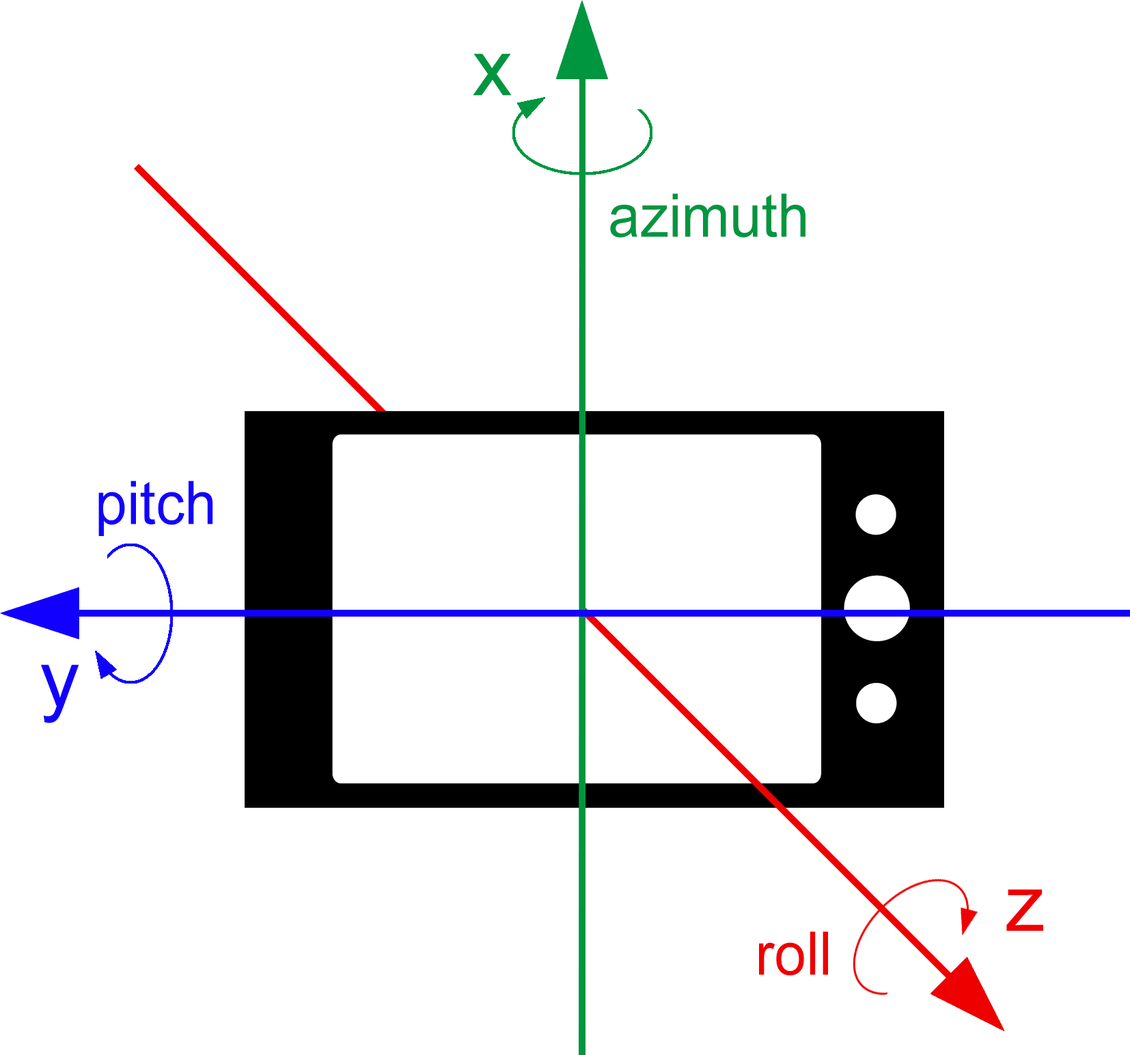
<style>
.page{position:relative;width:1130px;height:1055px;background:#ffffff}
.page>*{position:absolute;margin:0}
.t1{font:136.6px "ArialMT";color:#009640}
.t2{font:103.3px "ArialMT";color:#009640;scale:0.96 1}
.t3{font:103.3px "ArialMT";color:#1200ff;scale:0.96 1}
.t4{font:136.6px "ArialMT";color:#1200ff}
.t5{font:136.6px "ArialMT";color:#ef0000}
.t6{font:103.3px "ArialMT";color:#ef0000;scale:0.96 1}
</style>
<div class="page">
<p class="t1" style="left:473px;top:53px;width:39px;height:43px">x</p>
<p class="t2" style="left:610px;top:193px;width:195px;height:45px">azimuth</p>
<p class="t3" style="left:98px;top:481px;width:115px;height:55px">pitch</p>
<p class="t4" style="left:41px;top:665px;width:38px;height:58px">y</p>
<p class="t5" style="left:1006px;top:889px;width:37px;height:43px">z</p>
<p class="t6" style="left:759px;top:932px;width:69px;height:44px">roll</p>
</div>
